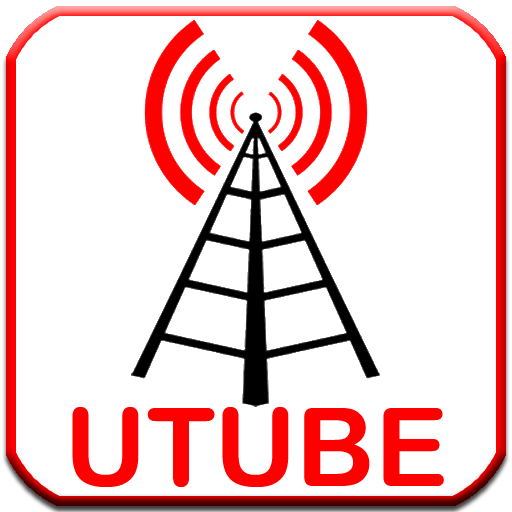
<style>
.page{position:relative;width:512px;height:512px;background:#ffffff}
.page>*{position:absolute;margin:0}
.t1{font:108.7px "ArialRoundedMTBold";color:#ff0000}
</style>
<div class="page">
<p class="t1" style="left:72px;top:407px;width:372px;height:80px">UTUBE</p>
</div>
